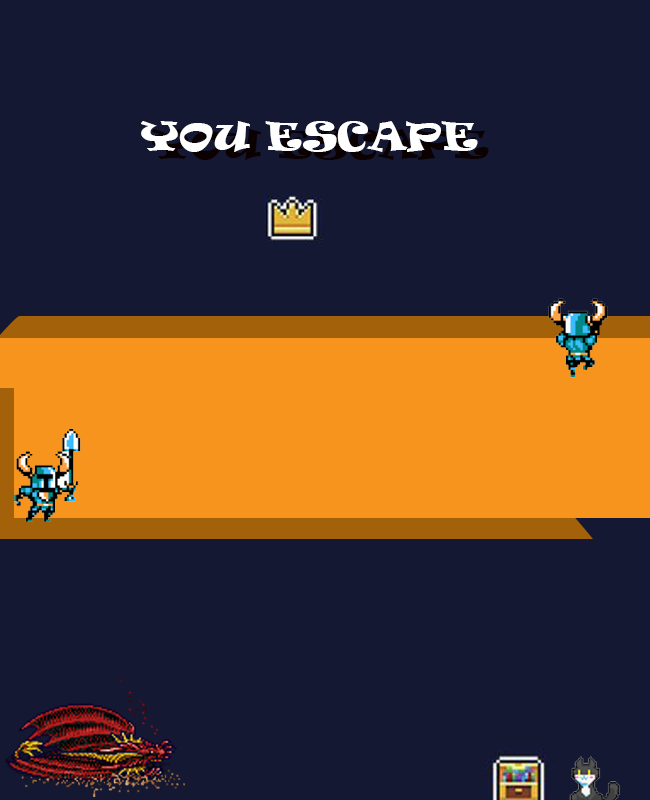
<style>
.page{position:relative;width:650px;height:800px;background:#141833}
.page>*{position:absolute;margin:0}
.t1{font:36.5px "Ravie";color:#ffffff;scale:1.15 1}
</style>
<div class="page">
<p class="t1" style="left:141px;top:121px;width:337px;height:31px">YOU ESCAPE</p>
</div>
